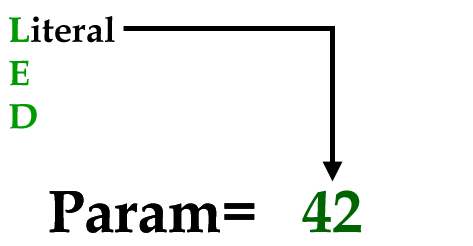
<style>
.page{position:relative;width:473px;height:246px;background:#ffffff}
.page>*{position:absolute;margin:0}
.t1{font:36px "BookAntiqua-Bold";color:#000000}
.t2{font:36px "BookAntiqua-Bold";color:#009b00}
.t3{font:60px "BookAntiqua-Bold";color:#000000}
.t4{font:60px "BookAntiqua-Bold";color:#ffffff}
.t5{font:60px "BookAntiqua-Bold";color:#006400}
</style>
<div class="page">
<p class="t1" style="left:9px;top:16px;width:106px;height:27px"><span class="t2">L</span>iteral</p>
<p class="t2" style="left:9px;top:17px;width:28px;height:112px">L<br>E<br>D</p>
<p class="t3" style="left:5px;top:190px;width:250px;height:43px"><span class="t4">@</span>Param=</p>
<p class="t3" style="left:5px;top:190px;width:357px;height:43px"><span class="t4">@</span>Param=<span class="t4">@</span><span class="t5">42</span></p>
</div>
